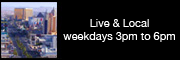
<style>
.page{position:relative;width:180px;height:60px;background:#000000}
.page>*{position:absolute;margin:0}
.t1{font:11px "HelveticaNeue";color:#ffffff}
</style>
<div class="page">
<p class="t1" style="left:63px;top:19px;width:112px;height:23px;text-align:center">Live &amp; Local<br>weekdays 3pm to 6pm</p>
</div>
